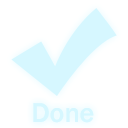
<style>
.page{position:relative;width:128px;height:128px;background:#ffffff}
.page>*{position:absolute;margin:0}
.t1{font:28px "FranklinGothic-Medium";color:#d6f7ff}
</style>
<div class="page">
<p class="t1" style="left:33px;top:103px;width:61px;height:20px">Done</p>
<p class="t1" style="left:33px;top:103px;width:61px;height:20px">Done</p>
</div>
